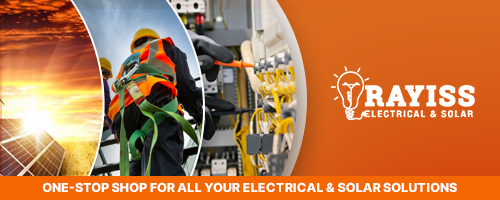
<style>
.page{position:relative;width:500px;height:200px}
.page>*{position:absolute;margin:0}
.t1{font:12.5px "Inter-ExtraBold";color:#ffffff;text-transform:uppercase}
</style>
<div class="page">
<p class="t1" style="left:42px;top:182px;width:415px;height:11px">One-Stop Shop for All Your Electrical &amp; Solar Solutions</p>
</div>
